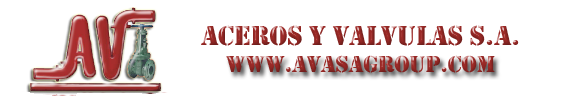
<style>
.page{position:relative;width:569px;height:99px;background:#ffffff}
.page>*{position:absolute;margin:0}
.t1{font:28px "Stencil";letter-spacing:-0.01em;color:#9e2b28}
.t2{font:24px "Stencil";letter-spacing:-0.01em}
</style>
<div class="page">
<p class="t1" style="left:201px;top:25px;width:318px;height:21px">Aceros y Valvulas S.A.</p>
<p class="t2" style="left:226px;top:55px;width:269px;height:18px">www.avasagroup.com</p>
</div>
